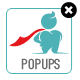
<style>
.page{position:relative;width:80px;height:80px;background:#ffffff}
.page>*{position:absolute;margin:0}
.t1{font:15px "Kenzo";letter-spacing:0.025em;color:#6a6a6a}
</style>
<div class="page">
<p class="t1" style="left:21px;top:58px;width:39px;height:12px">popups</p>
</div>
